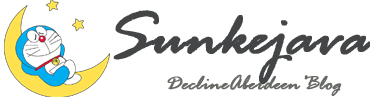
<style>
.page{position:relative;width:370px;height:100px;background:#ffffff}
.page>*{position:absolute;margin:0}
.t1{font:67px "RageItalicLetPlain";color:#434546;font-weight:bold}
.t2{font:22px "RageItalicLetPlain";color:#666964;font-weight:bold}
</style>
<div class="page">
<p class="t1" style="left:113px;top:10px;width:259px;height:75px">Sunkejava</p>
<p class="t2" style="left:167px;top:74px;width:175px;height:22px">DeclineAberdeen’Blog</p>
</div>
